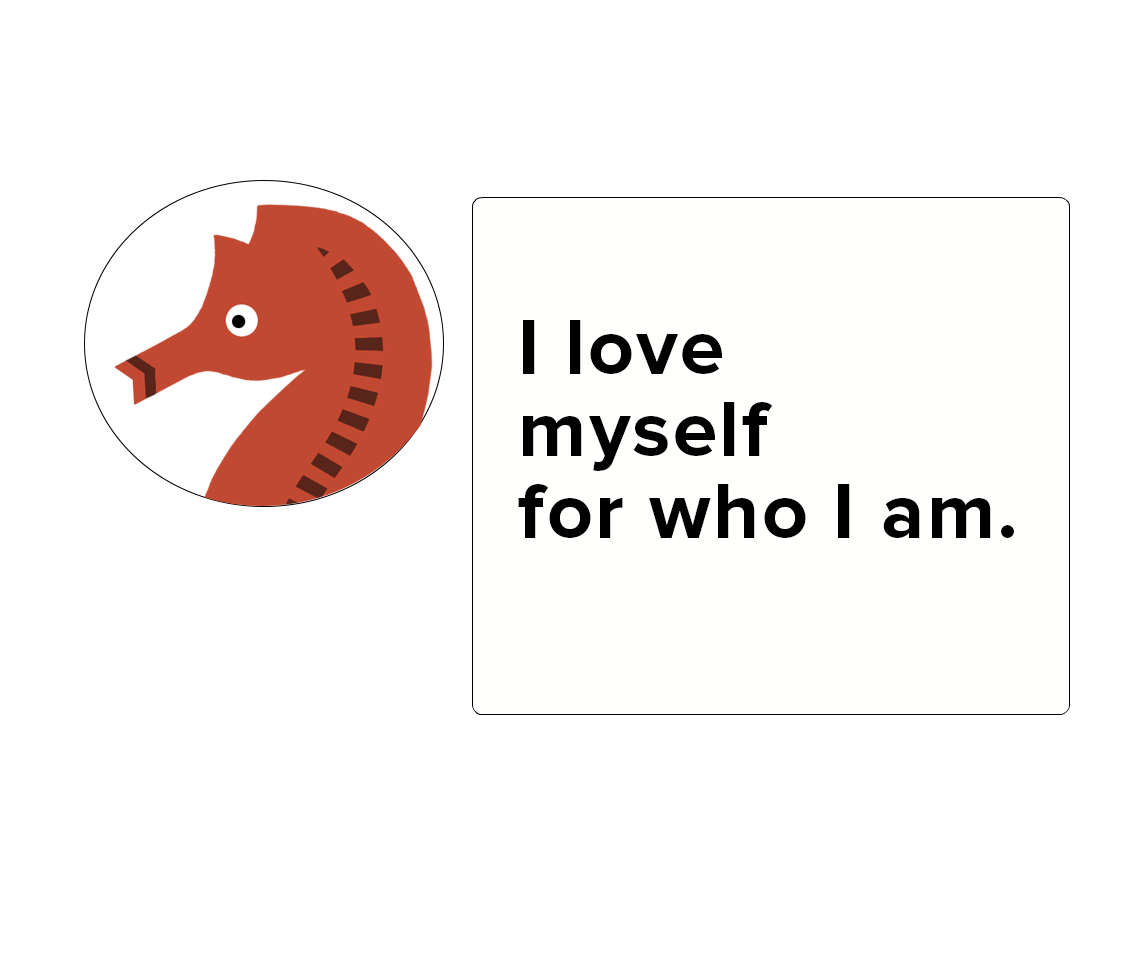
<style>
.page{position:relative;width:1134px;height:980px;background:#ffffff}
.page>*{position:absolute;margin:0}
.t1{font:80px/80px "ProximaNova-Bold";letter-spacing:0.03em;color:#000000}
</style>
<div class="page">
<p class="t1" style="left:518px;top:320px;width:496px;height:218px">I love <br>myself <br>for who I am.</p>
</div>
